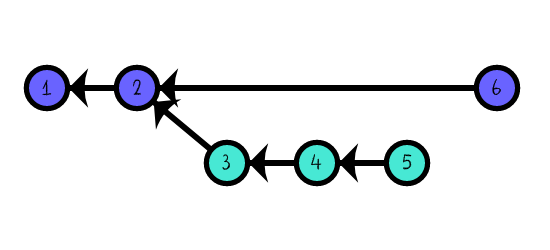
<style>
.page{position:relative;width:550px;height:250px;background:#ffffff}
.page>*{position:absolute;margin:0}
.t1{font:25px "DKCrayonCrumble";color:#000000}
.t2{font:25px "DKCrayonCrumble"}
</style>
<div class="page">
<p class="t1" style="left:42px;top:79px;width:10px;height:17px">1</p>
<p class="t1" style="left:133px;top:79px;width:8px;height:16px">2</p>
<p class="t1" style="left:492px;top:79px;width:9px;height:16px">6</p>
<p class="t1" style="left:222px;top:154px;width:8px;height:16px">3</p>
<p class="t2" style="left:311px;top:154px;width:11px;height:16px">4</p>
<p class="t1" style="left:403px;top:154px;width:9px;height:16px">5</p>
</div>
